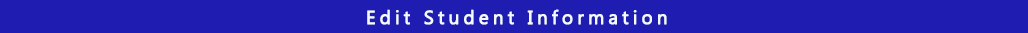
<style>
.page{position:relative;width:1028px;height:33px;background:#1f1cb1}
.page>*{position:absolute;margin:0}
.t1{font:18.8px "MicrosoftNewTaiLue";letter-spacing:0.2em;color:#f4fafe;font-weight:bold}
</style>
<div class="page">
<p class="t1" style="left:367px;top:9px;width:300px;height:16px">Edit Student Information</p>
</div>
